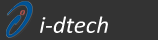
<style>
.page{position:relative;width:158px;height:40px;background:#333333}
.page>*{position:absolute;margin:0}
.t1{font:24px "Calibri-Italic";color:#ffffff;scale:1.05 1}
</style>
<div class="page">
<p class="t1" style="left:40px;top:16px;width:68px;height:17px">i-dtech</p>
</div>
